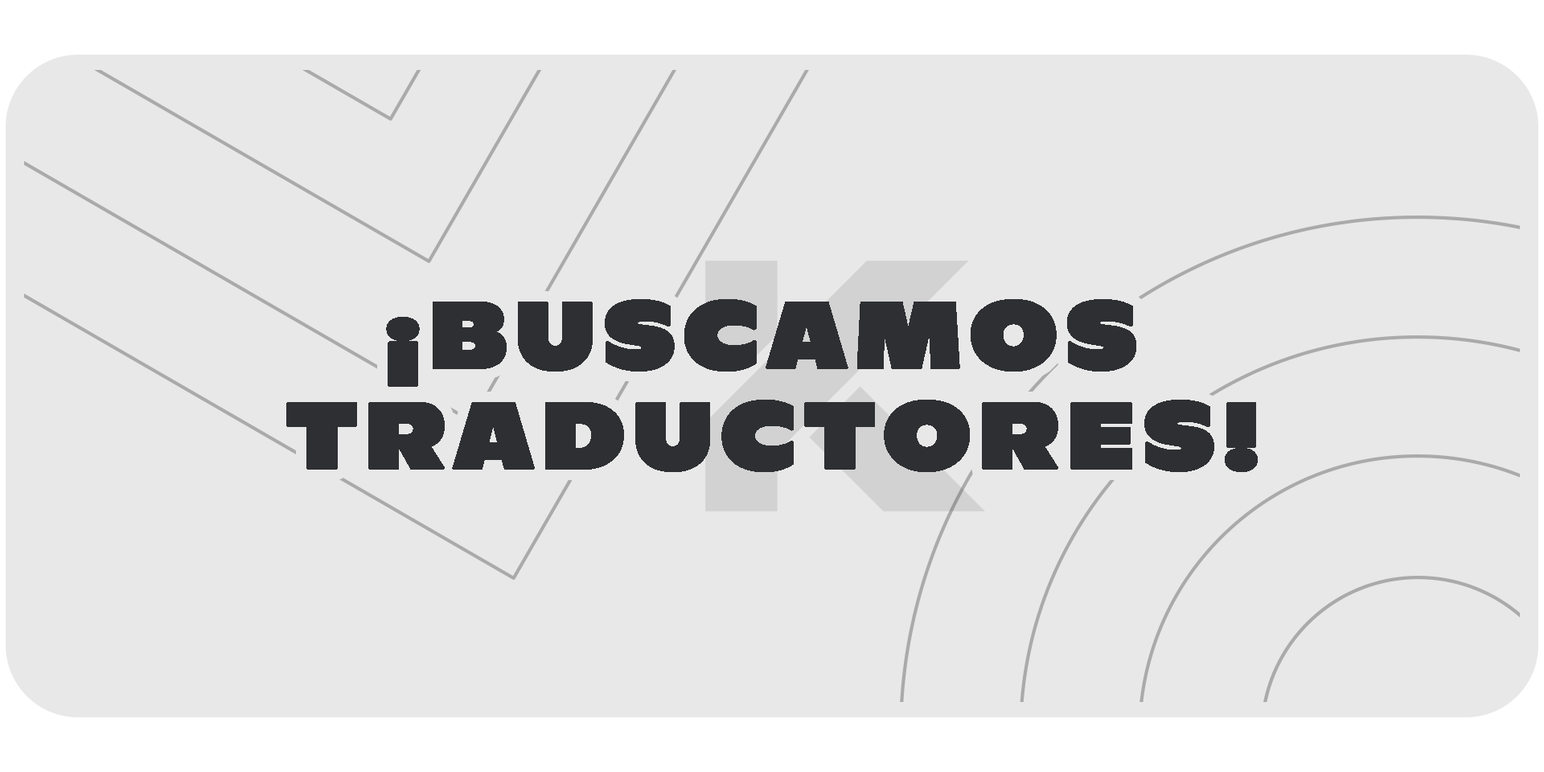
<style>
.page{position:relative;width:1544px;height:772px;background:#e8e8e8}
.page>*{position:absolute;margin:0}
.t1{font:93px "DiscordRegular";letter-spacing:0.08em;color:#2e2f32;font-weight:bold;scale:0.91 1}
</style>
<div class="page">
<p class="t1" style="left:286px;top:299px;width:972px;height:173px;text-align:center">¡BUSCAMOS <br>TRADUCTORES!</p>
</div>
